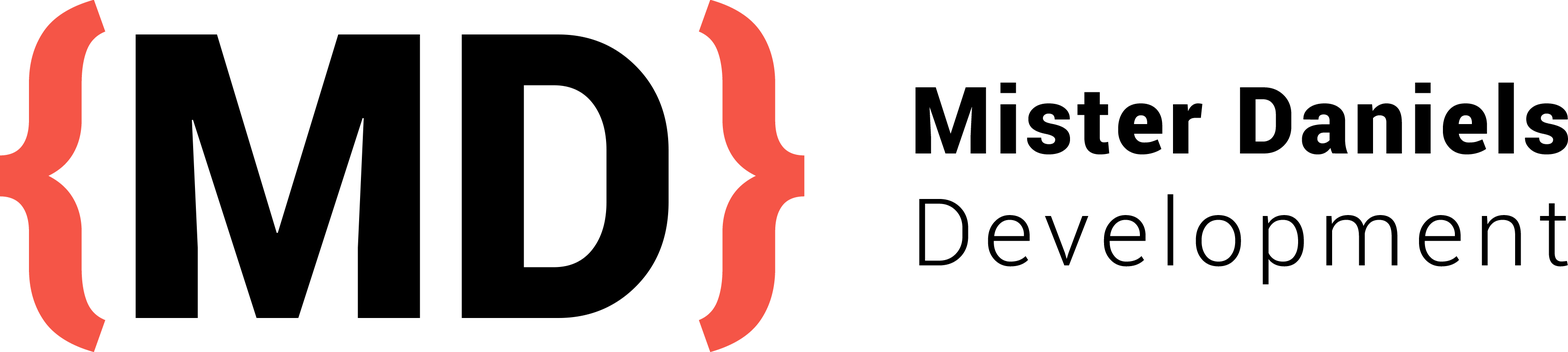
<style>
.page{position:relative;width:1568px;height:352px;background:#ffffff}
.page>*{position:absolute;margin:0}
.t1{font:368.8px "Roboto-Black";letter-spacing:0.047em;color:#f55547}
.t2{font:92.9px "Roboto-Black";letter-spacing:0.047em;color:#000000}
.t3{font:93.3px "Roboto-Light";letter-spacing:0.107em;color:#000000;scale:1.03 1}
</style>
<div class="page">
<p class="t1" style="left:0px;top:0px;width:105px;height:352px">{</p>
<p class="t1" style="left:699px;top:0px;width:106px;height:352px">}</p>
<p class="t2" style="left:916px;top:82px;width:652px;height:203px">Mister Daniels<br><span class="t3">Development</span></p>
</div>
